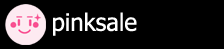
<style>
.page{position:relative;width:224px;height:49px;background:#000000}
.page>*{position:absolute;margin:0}
.t1{font:24px "Tahoma";color:#ffffff}
</style>
<div class="page">
<p class="t1" style="left:53px;top:12px;width:84px;height:24px">pinksale</p>
</div>
